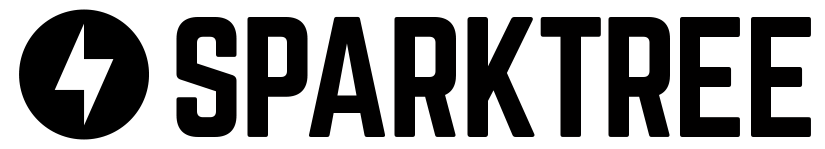
<style>
.page{position:relative;width:825px;height:149px;background:#ffffff}
.page>*{position:absolute;margin:0}
.t1{font:150px "Norwester-Regular";letter-spacing:-0.027em;color:#010000;text-transform:uppercase}
</style>
<div class="page">
<p class="t1" style="left:176px;top:16px;width:635px;height:121px">SPARKTREE</p>
</div>
